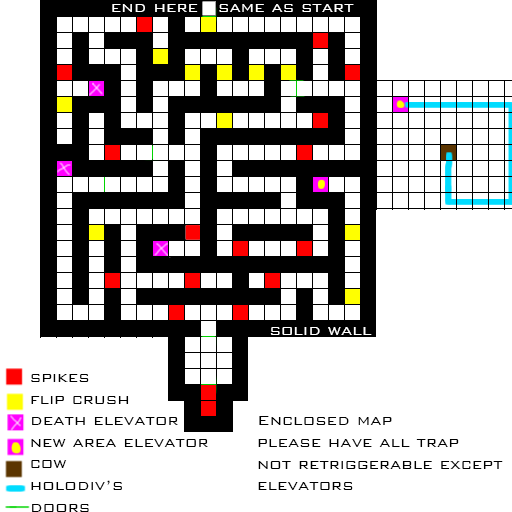
<style>
.page{position:relative;width:512px;height:512px;background:#ffffff}
.page>*{position:absolute;margin:0}
.t1{font:18px "BankGothic-Light";color:#ffffff}
.t2{font:18px "BankGothic-Light";color:#000000}
</style>
<div class="page">
<p class="t1" style="left:112px;top:4px;width:242px;height:8px">end here   same as start</p>
<p class="t1" style="left:270px;top:327px;width:102px;height:8px">solid wall</p>
<p class="t2" style="left:31px;top:374px;width:177px;height:138px">spikes<br>flip crush<br>death elevator<br>new area elevator<br>cow<br>holodiv’s<br>doors</p>
<p class="t2" style="left:258px;top:416px;width:245px;height:74px">Enclosed map<br>please have all trap<br>not retriggerable except<br>elevators</p>
</div>
